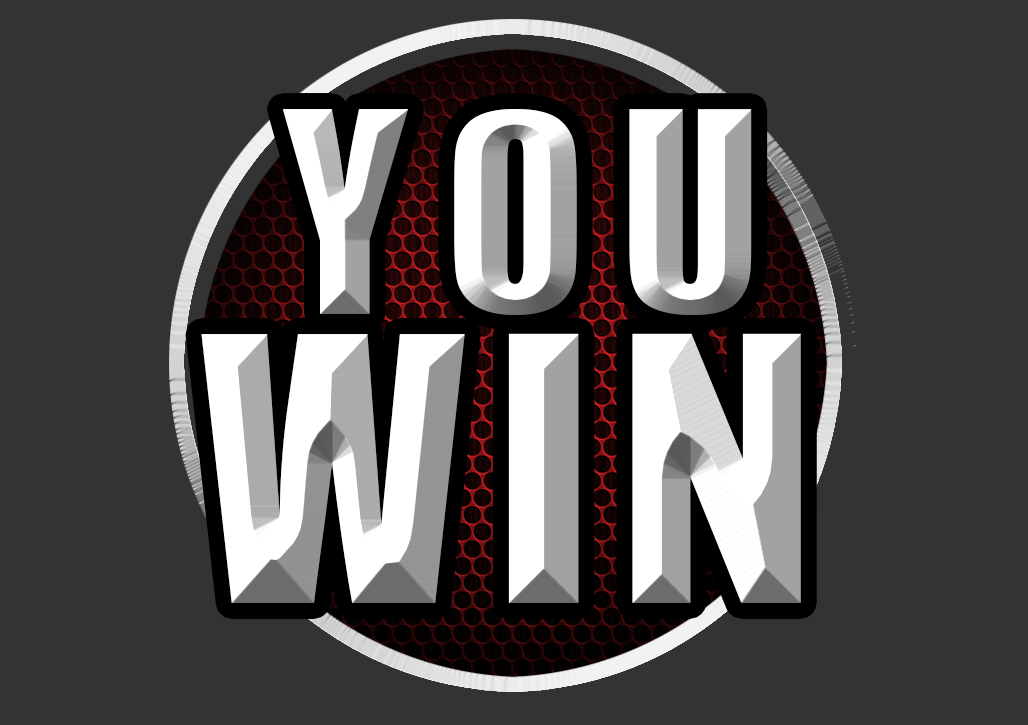
<style>
.page{position:relative;width:1028px;height:725px;background:#333333}
.page>*{position:absolute;margin:0}
.t1{font:305px "JCHEadA";letter-spacing:0.1em}
.t2{font:400.5px "JCHEadA";letter-spacing:0.075em}
</style>
<div class="page">
<p class="t1" style="left:282px;top:109px;width:470px;height:206px">YOU</p>
<p class="t2" style="left:201px;top:333px;width:600px;height:270px">WIN</p>
</div>
